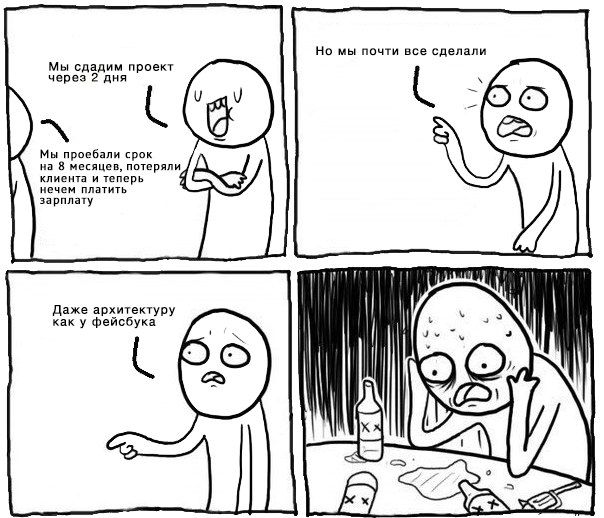
<style>
.page{position:relative;width:604px;height:518px;background:#ffffff}
.page>*{position:absolute;margin:0}
.t1{font:12px "HelveticaNeue";letter-spacing:0.075em;color:#000000;font-weight:bold}
.t2{font:12px/12px "HelveticaNeue";letter-spacing:0.075em;color:#000000;font-weight:bold}
.t3{font:12px/12px "PTSans-Regular";letter-spacing:0.05em;color:#000000;font-weight:bold}
</style>
<div class="page">
<p class="t1" style="left:316px;top:46px;width:170px;height:11px">Но мы почти все сделали</p>
<p class="t2" style="left:48px;top:62px;width:126px;height:22px">Мы сдадим проект<br>через 2 дня</p>
<p class="t3" style="left:40px;top:149px;width:141px;height:58px">Мы проебали срок<br>на 8 месяцев, потеряли<br>клиента и теперь<br>нечем платить<br>зарплату</p>
<p class="t2" style="left:52px;top:305px;width:124px;height:24px">Даже архитектуру<br>как у фейсбука</p>
</div>
